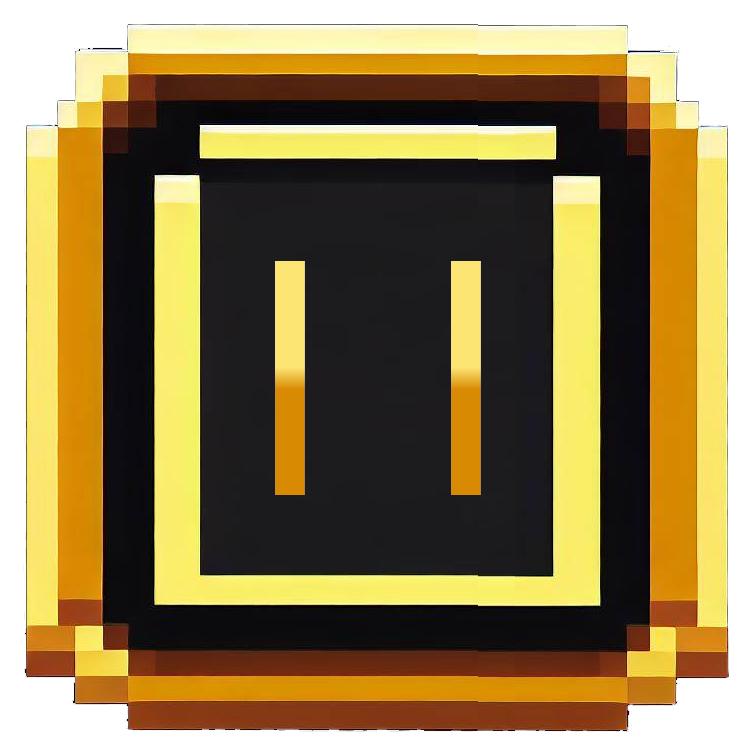
<style>
.page{position:relative;width:754px;height:754px}
.page>*{position:absolute;margin:0}
.t1{font:300px "VCROSDMono"}
</style>
<div class="page">
<p class="t1" style="left:275px;top:261px;width:206px;height:234px">||</p>
<p class="t1" style="left:275px;top:261px;width:206px;height:234px">||</p>
</div>
